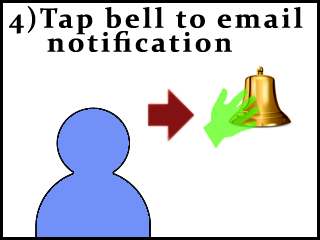
<style>
.page{position:relative;width:320px;height:240px;background:#ffffff}
.page>*{position:absolute;margin:0}
.t1{font:28px/24px "Constantia-Bold";letter-spacing:0.1em;color:#000000}
.t2{font:28px/18px "Constantia-Bold";letter-spacing:0.1em;color:#000000}
</style>
<div class="page">
<p class="t1" style="left:9px;top:6px;width:294px;height:46px"><span class="t2">4)</span>Tap bell to email <br>    notification</p>
</div>
